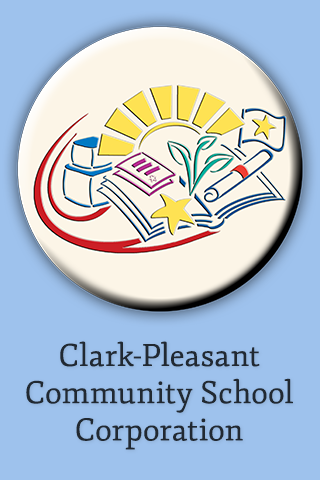
<style>
.page{position:relative;width:320px;height:480px;background:#9ec2ed}
.page>*{position:absolute;margin:0}
.t1{font:31px "Fjord-One";letter-spacing:0.005em;color:#212932}
</style>
<div class="page">
<p class="t1" style="left:26px;top:341px;width:267px;height:109px;text-align:center">Clark-Pleasant<br>Community School<br>Corporation</p>
</div>
